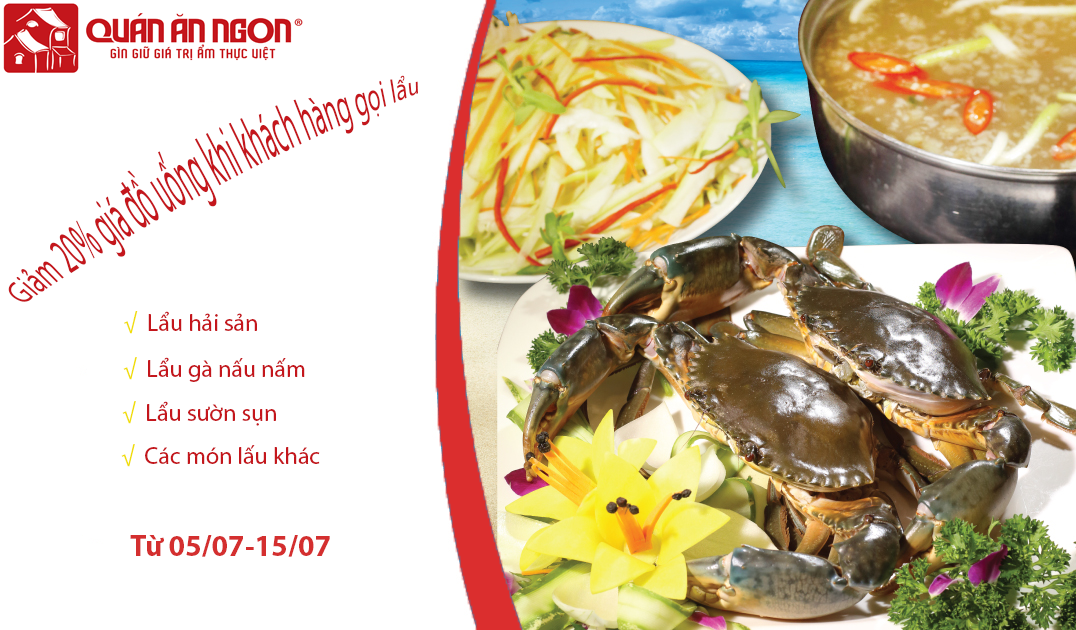
<style>
.page{position:relative;width:1076px;height:630px;background:#ffffff}
.page>*{position:absolute;margin:0}
.t1{font:24px "MyriadPro-Regular";color:#c4161c}
.t2{font:24px "MyriadPro-Regular";color:#f1de09}
.t3{font:30px "MyriadPro-Bold";color:#d42f2f}
</style>
<div class="page">
<p class="t1" style="left:8px;top:75px;width:410px;height:227px;rotate:-28deg">Giảm 20% giá đồ uống khi khách hàng gọi lẩu</p>
<p class="t1" style="left:124px;top:311px;width:133px;height:23px"><span class="t2"> √</span>  Lẩu hải sản</p>
<p class="t1" style="left:123px;top:357px;width:182px;height:25px"><span class="t2">√</span>  Lẩu gà nấu nấm</p>
<p class="t1" style="left:122px;top:401px;width:154px;height:25px"><span class="t2">√</span>  Lẩu sườn sụn</p>
<p class="t1" style="left:121px;top:444px;width:199px;height:23px"><span class="t2">√</span>  Các món lấu khác</p>
<p class="t3" style="left:130px;top:535px;width:200px;height:22px">Từ 05/07-15/07</p>
</div>
